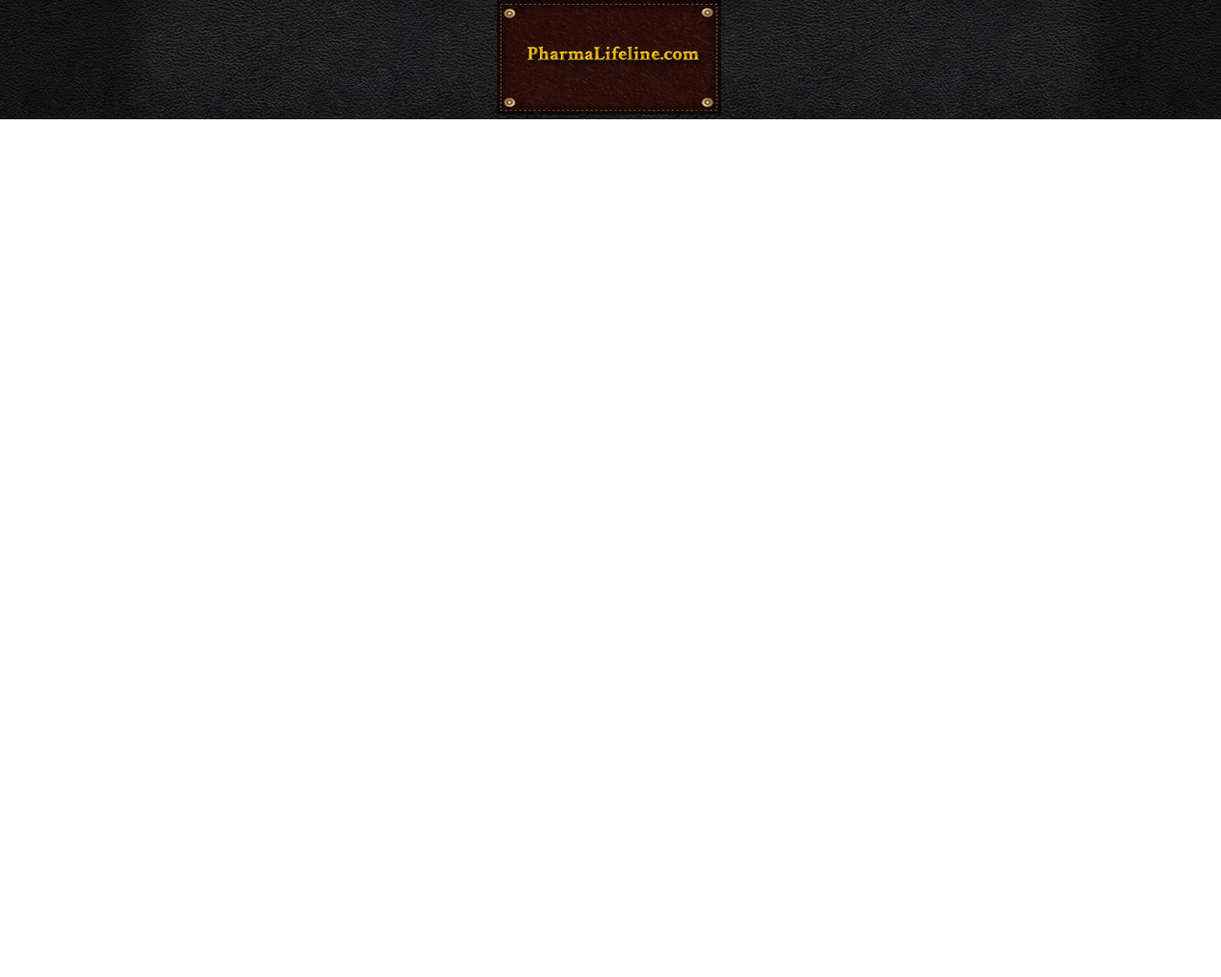
<style>
.page{position:relative;width:1221px;height:977px;background:#ffffff}
.page>*{position:absolute;margin:0}
.t1{font:19.3px "CrimsonText-Bold"}
</style>
<div class="page">
<p class="t1" style="left:527px;top:46px;width:172px;height:14px">PharmaLifeline.com</p>
</div>
